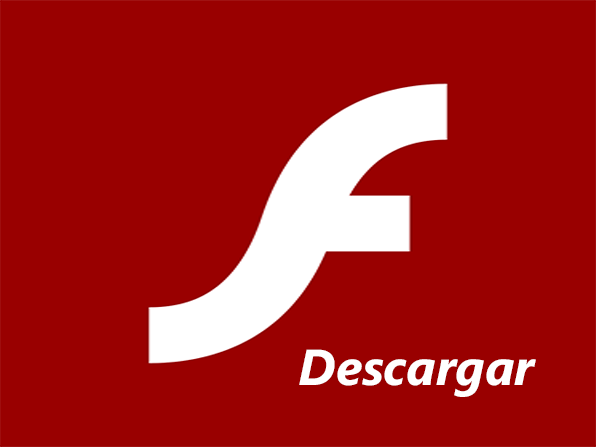
<style>
.page{position:relative;width:596px;height:447px;background:#990000}
.page>*{position:absolute;margin:0}
.t1{font:50.3px "SegoeUI-BoldItalic";color:#ffffff}
</style>
<div class="page">
<p class="t1" style="left:299px;top:349px;width:237px;height:48px">Descargar</p>
</div>
